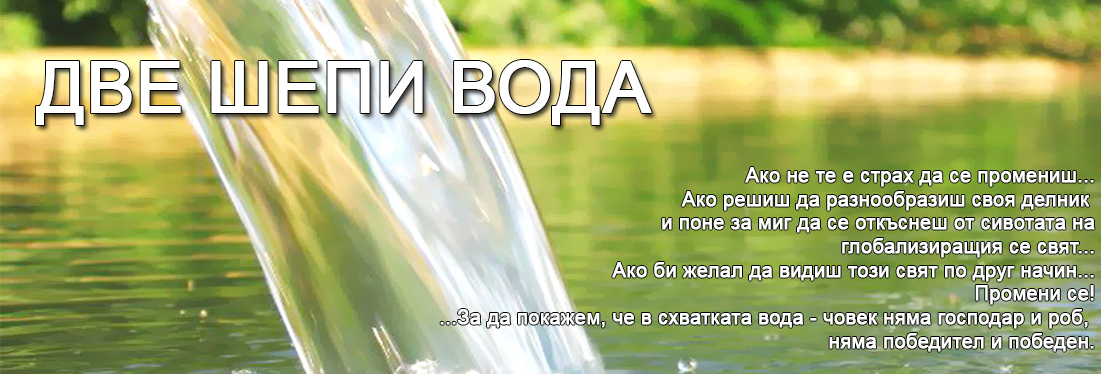
<style>
.page{position:relative;width:1101px;height:374px}
.page>*{position:absolute;margin:0}
.t1{font:71px "ArialMT";color:#ffffff;font-weight:bold}
.t2{font:19.8px "ArialMT";color:#ffffff;font-weight:bold}
</style>
<div class="page">
<p class="t1" style="left:36px;top:60px;width:616px;height:65px">ДВЕ ШЕПИ ВОДА</p>
<p class="t2" style="left:440px;top:167px;width:655px;height:185px;text-align:right">Ако не те е страх да се промениш...<br>Ако решиш да разнообразиш своя делник <br>и поне за миг да се откъснеш от сивотата на<br>глобализиращия се свят...<br>Ако би желал да видиш този свят по друг начин...<br>Промени се!<br>...За да покажем, че в схватката вода - човек няма господар и рoб, <br>няма победител и победен.</p>
</div>
